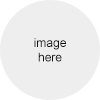
<style>
.page{position:relative;width:100px;height:100px;background:#eeeeee}
.page>*{position:absolute;margin:0}
.t1{font:12px "ArialMT";color:#121212}
</style>
<div class="page">
<p class="t1" style="left:34px;top:38px;width:32px;height:24px;text-align:center">image<br>here</p>
</div>
